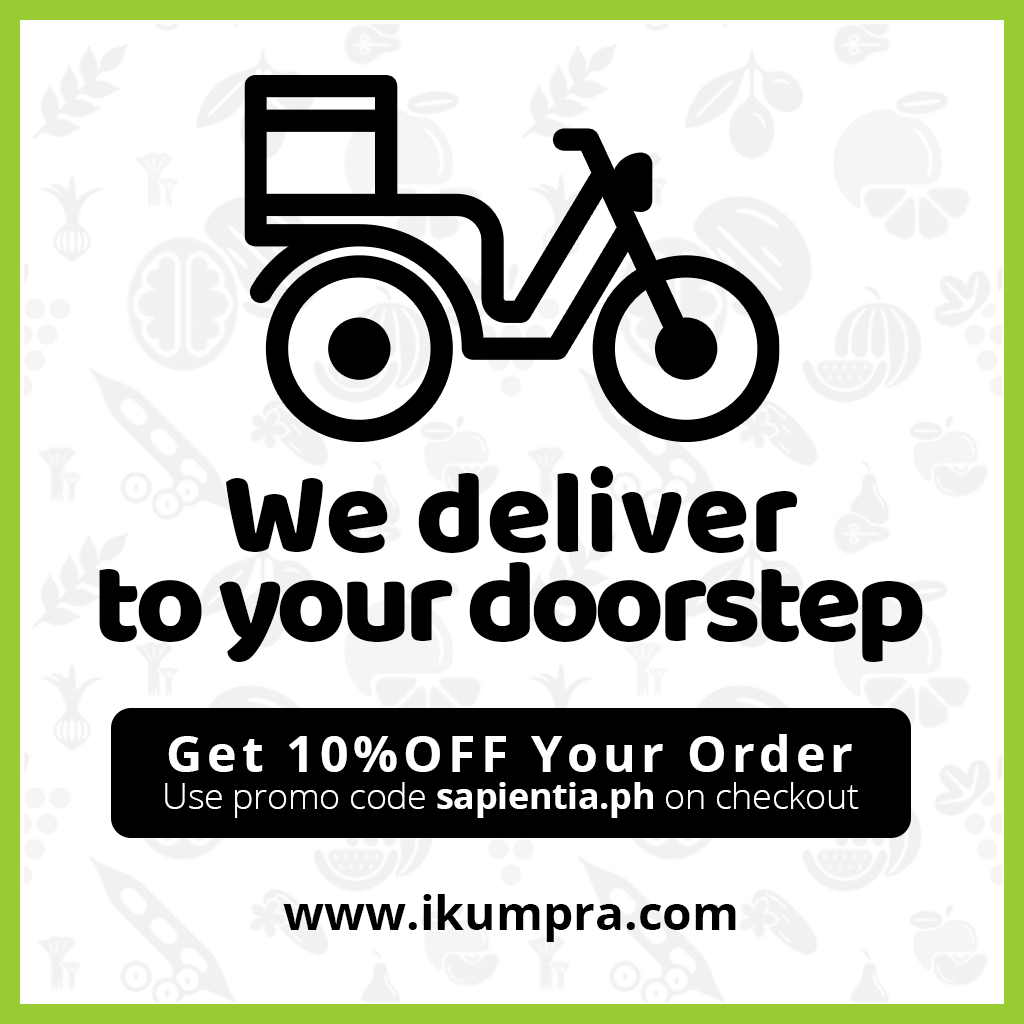
<style>
.page{position:relative;width:1024px;height:1024px;background:#ffffff}
.page>*{position:absolute;margin:0}
.t1{font:120px "BalooBhaijaan-Regular";color:#000000}
.t2{font:120px "BalooBhaijaan-Regular";letter-spacing:-0.05em;color:#000000}
.t3{font:50px "OpenSans-Bold";letter-spacing:0.1em;color:#ffffff}
.t4{font:36px "OpenSans-Light";letter-spacing:-0.01em;color:#ffffff}
.t5{font:36px "OpenSans-Bold";letter-spacing:-0.01em;color:#ffffff}
.t6{font:48px "OpenSans-Bold";color:#000000}
</style>
<div class="page">
<p class="t1" style="left:226px;top:466px;width:572px;height:87px">We deliver</p>
<p class="t2" style="left:99px;top:562px;width:824px;height:100px">to your doorstep</p>
<p class="t3" style="left:168px;top:734px;width:684px;height:38px">Get 10%OFF Your Order</p>
<p class="t4" style="left:165px;top:782px;width:694px;height:36px">Use promo code <span class="t5">sapientia.ph</span> on checkout</p>
<p class="t6" style="left:283px;top:894px;width:453px;height:48px">www.ikumpra.com</p>
</div>
